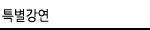
<style>
.page{position:relative;width:150px;height:30px;background:#ffffff}
.page>*{position:absolute;margin:0}
.t1{font:14px "NanumGothic";color:#000000;scale:0.9 1}
</style>
<div class="page">
<p class="t1" style="left:2px;top:9px;width:47px;height:14px">특별강연</p>
</div>
